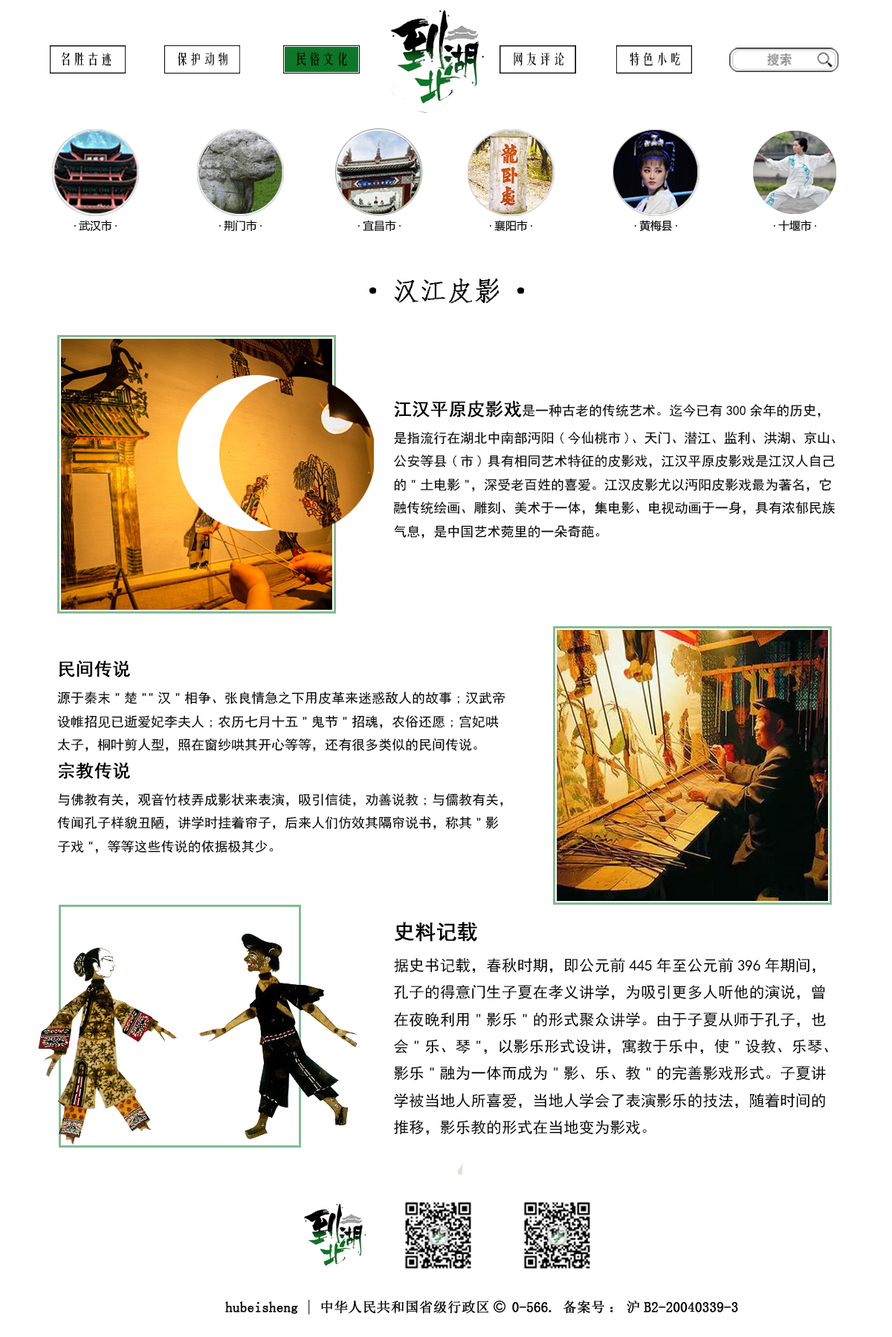
<style>
.page{position:relative;width:892px;height:1337px;background:#ffffff}
.page>*{position:absolute;margin:0}
.t1{font:13.6px "FZYTK--GBK1-0";color:#000000}
.t2{font:26.7px "·ÂËÎ";color:#000000;font-weight:bold}
.t3{font:13.4px "SimHei";color:#000000}
.t4{font:17.8px "SimHei";color:#000000;font-weight:bold}
.t5{font:15.4px "SimHei";color:#000000}
.t6{font:20.6px "SimHei";color:#000000;font-weight:bold}
</style>
<div class="page">
<p class="t1" style="left:61px;top:52px;width:50px;height:14px">名胜古迹</p>
<p class="t1" style="left:178px;top:52px;width:49px;height:14px">保护动物</p>
<p class="t1" style="left:296px;top:52px;width:51px;height:14px">民俗文化</p>
<p class="t1" style="left:513px;top:52px;width:51px;height:14px">网友评论</p>
<p class="t1" style="left:629px;top:52px;width:51px;height:14px">特色小吃</p>
<p class="t2" style="left:369px;top:278px;width:155px;height:25px">·汉江皮影·</p>
<p class="t3" style="left:393px;top:400px;width:442px;height:139px"><span class="t4">江汉平原皮影戏</span>是一种古老的传统艺术。迄今已有300余年的历史，是指流行在湖北中南部沔阳(今仙桃市)、天门、潜江、监利、洪湖、京山、公安等县(市)具有相同艺术特征的皮影戏，江汉平原皮影戏是江汉人自己的"土电影"，深受老百姓的喜爱。江汉皮影尤以沔阳皮影戏最为著名，它融传统绘画、雕刻、美术于一体，集电影、电视动画于一身，具有浓郁民族气息，是中国艺术菀里的一朵奇葩。</p>
<p class="t3" style="left:57px;top:661px;width:447px;height:193px"><span class="t4">民间传说<br></span>源于秦末"楚""汉"相争、张良情急之下用皮革来迷惑敌人的故事;汉武帝设帷招见已逝爱妃李夫人;农历七月十五"鬼节"招魂，农俗还愿;宫妃哄太子，桐叶剪人型，照在窗纱哄其开心等等，还有很多类似的民间传说。<br><span class="t4">宗教传说<br></span>与佛教有关，观音竹枝弄成影状来表演，吸引信徒，劝善说教;与儒教有关，传闻孔子样貌丑陋，讲学时挂着帘子，后来人们仿效其隔帘说书，称其"影子戏"，等等这些传说的依据极其少。</p>
<p class="t5" style="left:394px;top:922px;width:434px;height:213px"><span class="t6">史料记载<br></span>据史书记载，春秋时期，即公元前445年至公元前396年期间，孔子的得意门生子夏在孝义讲学，为吸引更多人听他的演说，曾在夜晚利用"影乐"的形式聚众讲学。由于子夏从师于孔子，也会"乐、琴"，以影乐形式设讲，寓教于乐中，使"设教、乐琴、影乐"融为一体而成为"影、乐、教"的完善影戏形式。子夏讲学被当地人所喜爱，当地人学会了表演影乐的技法，随着时间的推移，影乐教的形式在当地变为影戏。</p>
</div>
